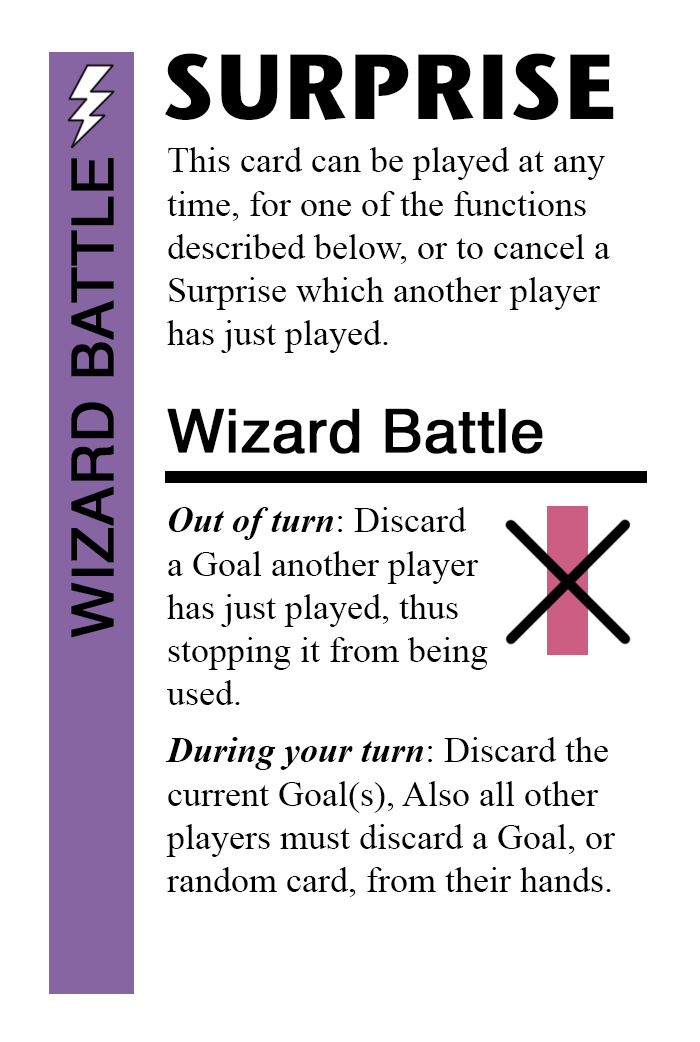
<style>
.page{position:relative;width:700px;height:1042px;background:#ffffff}
.page>*{position:absolute;margin:0}
.t1{font:92px "StoneSansITC-Bold";color:#000000}
.t2{font:36px "TimesNewRomanPSMT";color:#000000}
.t3{font:58px "Helvetica";color:#000000;font-weight:bold}
.t4{font:60px "Helvetica";color:#000000;font-weight:bold}
.t5{font:36px "TimesNewRomanPS-BoldItalicMT";color:#000000}
</style>
<div class="page">
<p class="t1" style="left:165px;top:53px;width:449px;height:67px">SURPRISE</p>
<p class="t2" style="left:167px;top:147px;width:443px;height:206px">This card can be played at any <br>time, for one of the functions<br>described below, or to cancel a<br>Surprise which another player<br>has just played.</p>
<p class="t3" style="left:71px;top:158px;width:43px;height:480px;rotate:-90deg">WIZARD BATTLE</p>
<p class="t4" style="left:167px;top:408px;width:376px;height:46px">Wizard Battle</p>
<p class="t2" style="left:167px;top:507px;width:321px;height:198px"><span class="t5">Out of turn</span>: Discard<br>a Goal another player<br>has just played, thus<br>stopping it from being<br>used.</p>
<p class="t2" style="left:165px;top:737px;width:451px;height:160px"><span class="t5">During your turn</span>: Discard the<br>current Goal(s), Also all other<br>players must discard a Goal, or<br>random card, from their hands.</p>
</div>
